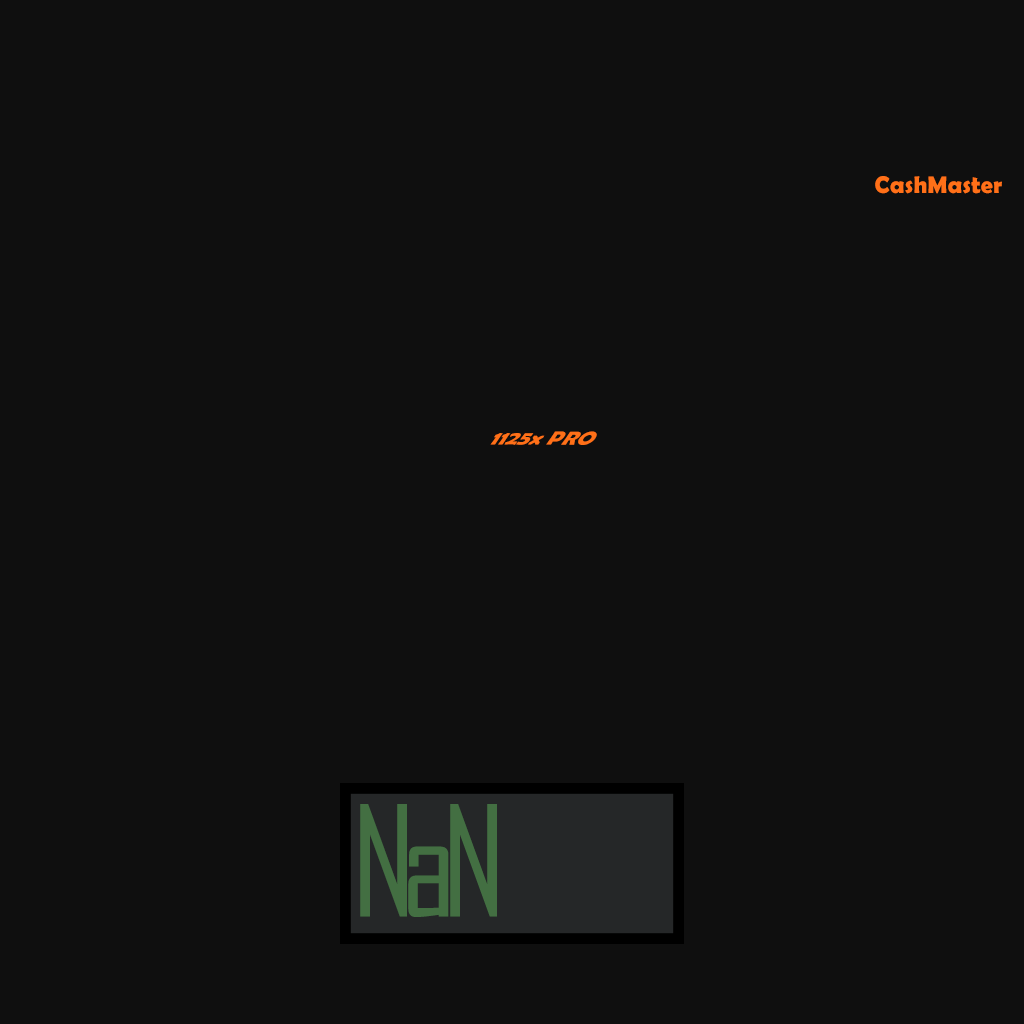
<style>
.page{position:relative;width:1024px;height:1024px;background:#0f0f0f}
.page>*{position:absolute;margin:0}
.t1{font:24.4px "BerlinSansFBDemi-Bold";letter-spacing:0.01em;color:#ff7018}
.t2{font:23.1px "BerlinSansFBDemi-Bold";letter-spacing:0.01em;color:#ff7018}
.t3{font:147px "AgencyFB-Reg";letter-spacing:-0.1em;color:#436f42}
</style>
<div class="page">
<p class="t1" style="left:875px;top:176px;width:127px;height:18px">CashMaster</p>
<p class="t2" style="left:490px;top:431px;width:107px;height:14px">1125x PRO</p>
<p class="t3" style="left:360px;top:804px;width:137px;height:113px">NaN</p>
</div>
